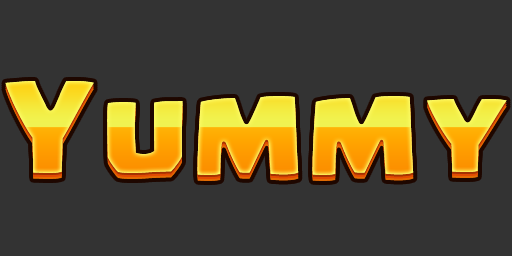
<style>
.page{position:relative;width:512px;height:256px;background:#333333}
.page>*{position:absolute;margin:0}
.t1{font:98.4px "Supercell-Magic";letter-spacing:0.06em}
</style>
<div class="page">
<p class="t1" style="left:5px;top:81px;width:502px;height:94px">Yummy</p>
</div>
